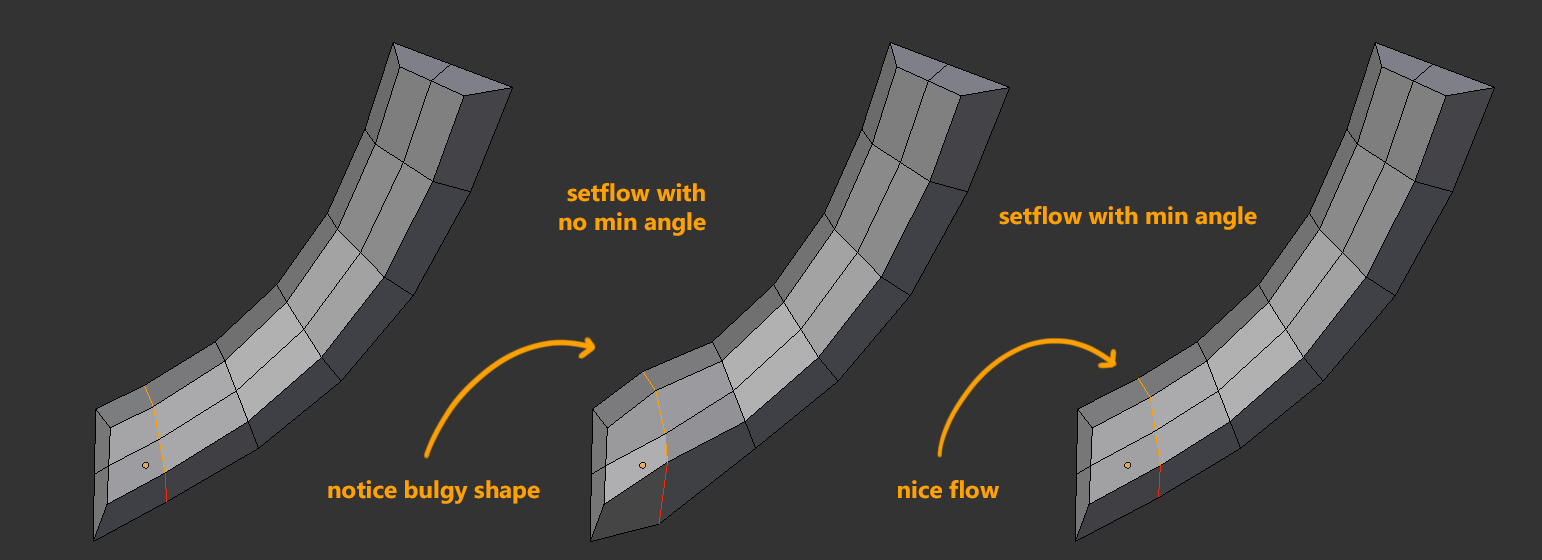
<style>
.page{position:relative;width:1542px;height:560px;background:#333333}
.page>*{position:absolute;margin:0}
.t1{font:24px "SegoeUI-Bold";color:#ffa200}
</style>
<div class="page">
<p class="t1" style="left:559px;top:183px;width:147px;height:53px;text-align:right">setflow with<br> no min angle</p>
<p class="t1" style="left:999px;top:206px;width:258px;height:24px">setflow with min angle</p>
<p class="t1" style="left:328px;top:480px;width:212px;height:24px">notice bulgy shape</p>
<p class="t1" style="left:898px;top:480px;width:101px;height:19px">nice flow</p>
</div>
